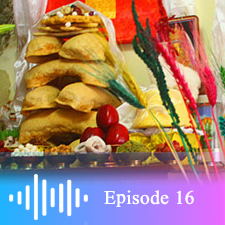
<style>
.page{position:relative;width:225px;height:225px}
.page>*{position:absolute;margin:0}
.t1{font:20px "Qomolangma-Title";color:#ffffff;font-weight:bold}
</style>
<div class="page">
<p class="t1" style="left:104px;top:190px;width:90px;height:17px">Episode 16</p>
</div>
